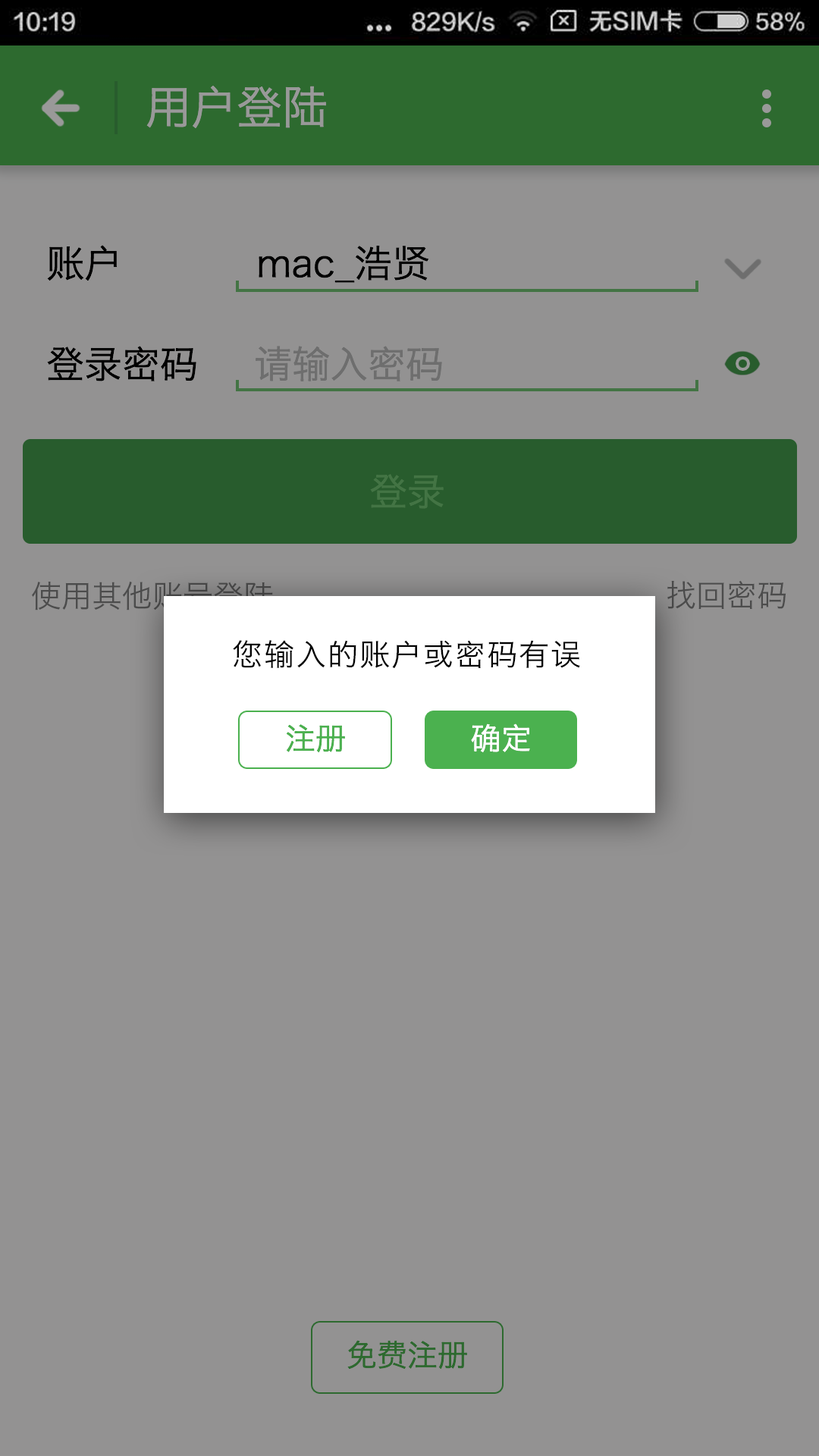
<style>
.page{position:relative;width:819px;height:1456px;background:#939292}
.page>*{position:absolute;margin:0}
.t1{font:45.5px "HiraginoSansGB-W3";color:#999999}
.t2{font:37.9px "HiraginoSansGB-W3";color:#000000}
.t3{font:37.9px "HiraginoSansGB-W3";color:#6e6e6e}
.t4{font:37.9px "HiraginoSansGB-W3";color:#437444}
.t5{font:30.7px "HiraginoSansGB-W3";color:#4c4c4c}
.t6{font:30.3px "HiraginoSansGB-W3";letter-spacing:0.05em;color:#000000}
.t7{font:30.3px "HiraginoSansGB-W3";color:#4bb14f}
.t8{font:30.3px "HiraginoSansGB-W3";color:#ffffff}
.t9{font:30.3px "HiraginoSansGB-W3";color:#2d6a2f}
</style>
<div class="page">
<p class="t1" style="left:146px;top:86px;width:180px;height:42px">用户登陆</p>
<p class="t2" style="left:47px;top:245px;width:70px;height:36px">账户</p>
<p class="t2" style="left:259px;top:245px;width:170px;height:38px">mac_浩贤</p>
<p class="t2" style="left:47px;top:346px;width:149px;height:35px">登录密码</p>
<p class="t3" style="left:256px;top:346px;width:186px;height:35px">请输入密码</p>
<p class="t4" style="left:370px;top:474px;width:74px;height:35px">登录</p>
<p class="t5" style="left:32px;top:582px;width:241px;height:28px">使用其他账号登陆</p>
<p class="t5" style="left:667px;top:580px;width:119px;height:29px">找回密码</p>
<p class="t6" style="left:233px;top:640px;width:347px;height:29px">您输入的账户或密码有误</p>
<p class="t7" style="left:286px;top:724px;width:59px;height:29px">注册</p>
<p class="t8" style="left:471px;top:723px;width:59px;height:29px">确定</p>
<p class="t9" style="left:347px;top:1340px;width:120px;height:30px">免费注册</p>
</div>
